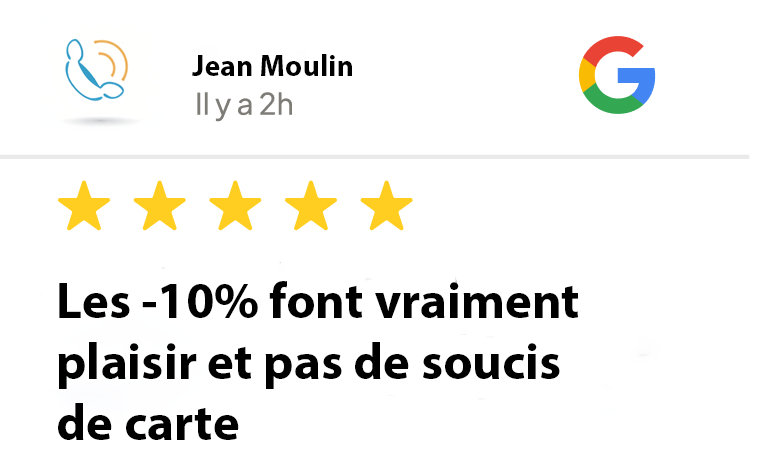
<style>
.page{position:relative;width:766px;height:469px;background:#ffffff}
.page>*{position:absolute;margin:0}
.t1{font:30px "MyriadPro-Bold";color:#000000}
.t2{font:51px "MyriadPro-Bold";color:#000000}
</style>
<div class="page">
<p class="t1" style="left:192px;top:54px;width:160px;height:22px">Jean Moulin</p>
<p class="t2" style="left:58px;top:281px;width:520px;height:159px">Les -10% font vraiment <br>plaisir et pas de soucis <br>de carte</p>
</div>
